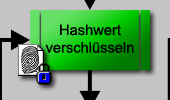
<style>
.page{position:relative;width:170px;height:100px;background:#c6c3c6}
.page>*{position:absolute;margin:0}
.t1{font:14.7px "ArialMT";color:#000000}
</style>
<div class="page">
<p class="t1" style="left:45px;top:24px;width:89px;height:29px;text-align:center">Hashwert<br>verschlüsseln</p>
</div>
